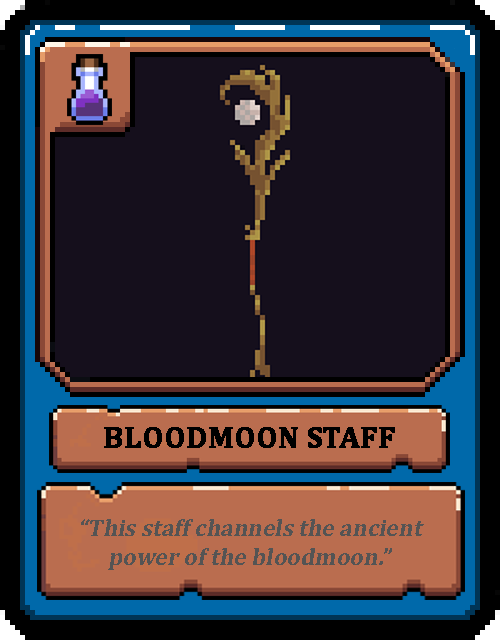
<style>
.page{position:relative;width:500px;height:640px;background:#150f1c}
.page>*{position:absolute;margin:0}
.t1{font:30px "Cambria-Bold";color:#000000;text-transform:uppercase;font-weight:bold}
.t2{font:24px "Cambria-Bold";color:#545454;font-style:italic}
</style>
<div class="page">
<p class="t1" style="left:104px;top:427px;width:291px;height:21px">BloodMoon Staff</p>
<p class="t2" style="left:81px;top:519px;width:343px;height:51px;text-align:center">“This staff channels the ancient power of the bloodmoon.”</p>
</div>
